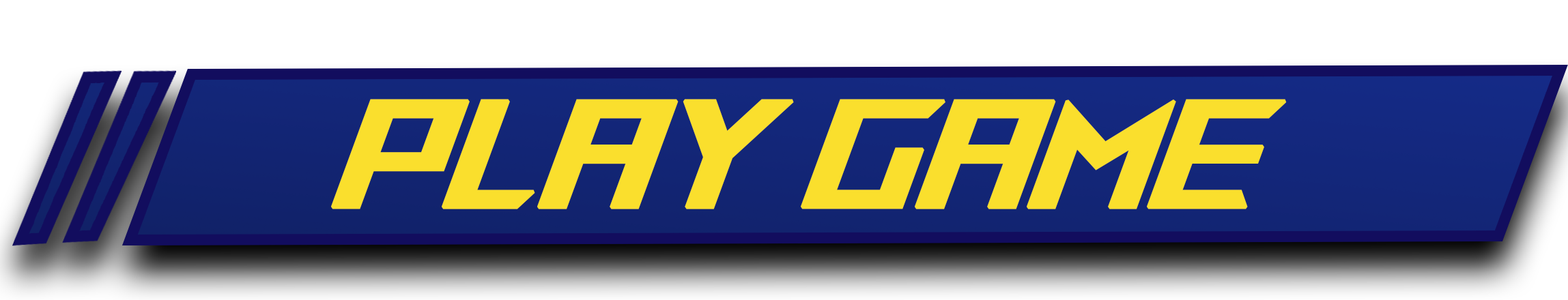
<style>
.page{position:relative;width:1568px;height:300px;background:#ffffff}
.page>*{position:absolute;margin:0}
.t1{font:161.9px "ROGFonts-Regular";color:#fadf2d;font-weight:bold;scale:0.77 1}
</style>
<div class="page">
<p class="t1" style="left:331px;top:99px;width:956px;height:111px">PLAY GAME</p>
</div>
